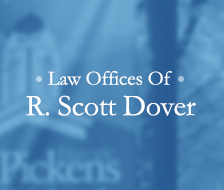
<style>
.page{position:relative;width:224px;height:190px}
.page>*{position:absolute;margin:0}
.t1{font:20.5px "Garamond";letter-spacing:-0.01em;color:#ffffff}
.t2{font:30px "Garamond";letter-spacing:-0.01em;color:#ffffff}
</style>
<div class="page">
<p class="t1" style="left:47px;top:71px;width:125px;height:15px">Law Offices Of</p>
<p class="t2" style="left:26px;top:95px;width:170px;height:21px">R. Scott Dover</p>
</div>
